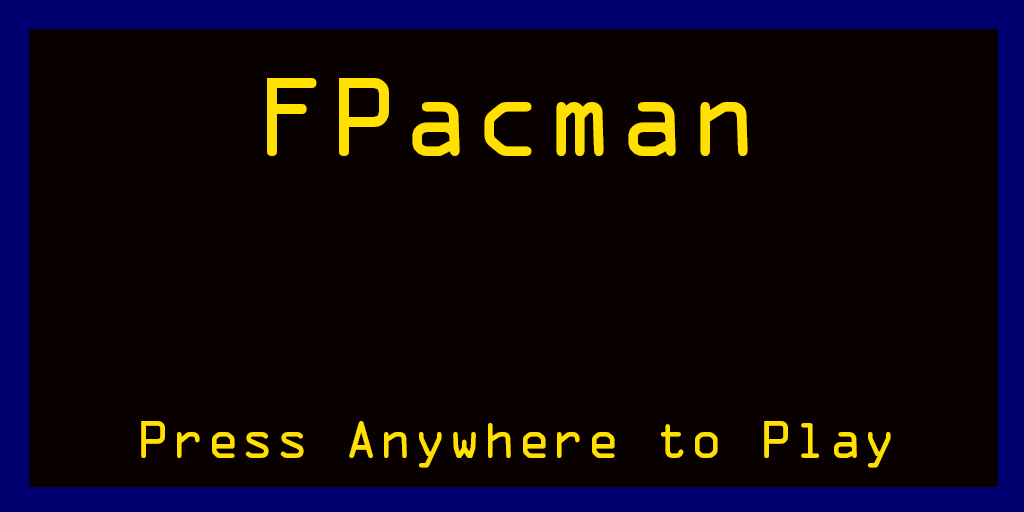
<style>
.page{position:relative;width:1024px;height:512px;background:#090000}
.page>*{position:absolute;margin:0}
.t1{font:100px "OCRAStd";color:#ffe000}
.t2{font:48px "OCRAStd";color:#ffe000}
</style>
<div class="page">
<p class="t1" style="left:267px;top:78px;width:481px;height:78px">FPacman</p>
<p class="t2" style="left:141px;top:421px;width:750px;height:47px">Press Anywhere to Play</p>
</div>
